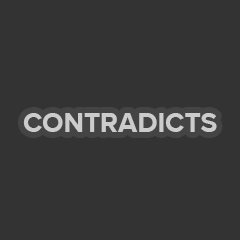
<style>
.page{position:relative;width:240px;height:240px;background:#333333}
.page>*{position:absolute;margin:0}
.t1{font:28px "ProximaNova-Bold";color:#cccccc;text-transform:uppercase}
</style>
<div class="page">
<p class="t1" style="left:23px;top:113px;width:194px;height:19px">contradicts</p>
</div>
